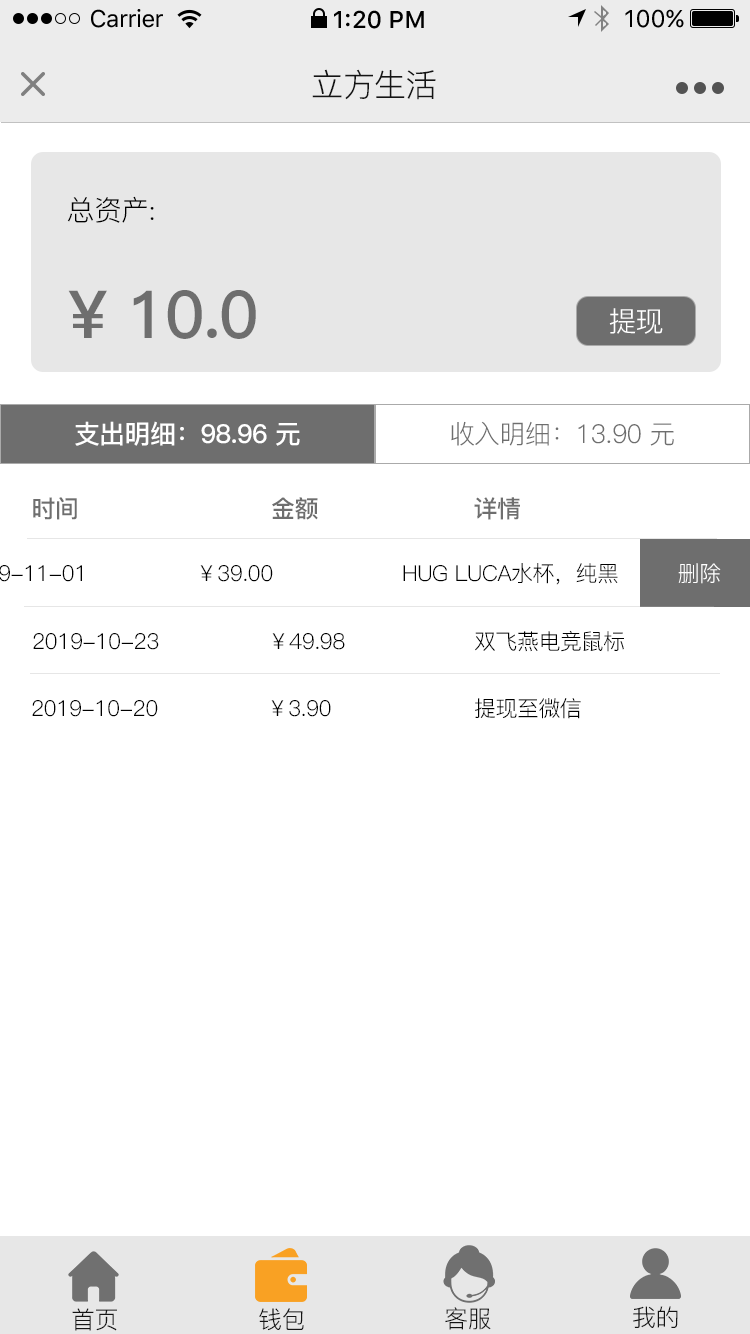
<style>
.page{position:relative;width:750px;height:1334px;background:#ffffff}
.page>*{position:absolute;margin:0}
.t1{font:24px "SFUIText-Regular";letter-spacing:-0.025em;color:#000000}
.t2{font:24px "SFUIText-Medium";color:#000000}
.t3{font:24px "SFUIText-Regular";color:#000000}
.t4{font:32.2px "PingFang-SC-Regular";letter-spacing:-0.02em;color:#141414}
.t5{font:28px "PingFang-SC-Regular";letter-spacing:-0.024em;color:#000000}
.t6{font:66px "PingFang-SC-Bold";letter-spacing:-0.024em;color:#6e6e6e}
.t7{font:28px "PingFang-SC-Regular";letter-spacing:-0.024em;color:#ffffff}
.t8{font:26px "PingFang-SC-Bold";letter-spacing:-0.024em;color:#ffffff}
.t9{font:26px "PingFang-SC-Regular";letter-spacing:-0.024em;color:#6e6e6e}
.t10{font:24px "PingFang-SC-Bold";letter-spacing:-0.024em;color:#6e6e6e}
.t11{font:22px "PingFang-SC-Regular";letter-spacing:-0.024em;color:#ffffff}
.t12{font:22px "PingFang-SC-Regular";letter-spacing:-0.024em;color:#000000}
.t13{font:24px "PingFang-SC-Regular";letter-spacing:-0.02em;color:#141414}
</style>
<div class="page">
<p class="t1" style="left:91px;top:9px;width:72px;height:19px">Carrier</p>
<p class="t2" style="left:334px;top:10px;width:90px;height:19px">1:20 PM</p>
<p class="t3" style="left:625px;top:9px;width:59px;height:19px">100%</p>
<p class="t4" style="left:312px;top:69px;width:124px;height:31px">立方生活</p>
<p class="t5" style="left:67px;top:196px;width:87px;height:27px">总资产:</p>
<p class="t6" style="left:68px;top:290px;width:188px;height:49px">¥ 10.0</p>
<p class="t7" style="left:609px;top:308px;width:54px;height:26px">提现</p>
<p class="t8" style="left:75px;top:421px;width:225px;height:25px">支出明细：98.96 元</p>
<p class="t9" style="left:451px;top:421px;width:223px;height:25px">收入明细：13.90 元</p>
<p class="t10" style="left:33px;top:497px;width:487px;height:23px">时间                          金额                     详情</p>
<p class="t11" style="left:678px;top:563px;width:43px;height:21px">删除</p>
<p class="t12" style="left:33px;top:630px;width:591px;height:22px">2019-10-23                ￥49.98                   双飞燕电竞鼠标</p>
<p class="t12" style="left:32px;top:698px;width:549px;height:21px">2019-10-20                ￥3.90                     提现至微信</p>
<p class="t13" style="left:72px;top:1308px;width:45px;height:23px">首页</p>
<p class="t13" style="left:259px;top:1308px;width:45px;height:23px">钱包</p>
<p class="t13" style="left:445px;top:1307px;width:46px;height:23px">客服</p>
<p class="t13" style="left:633px;top:1306px;width:45px;height:22px">我的</p>
</div>
